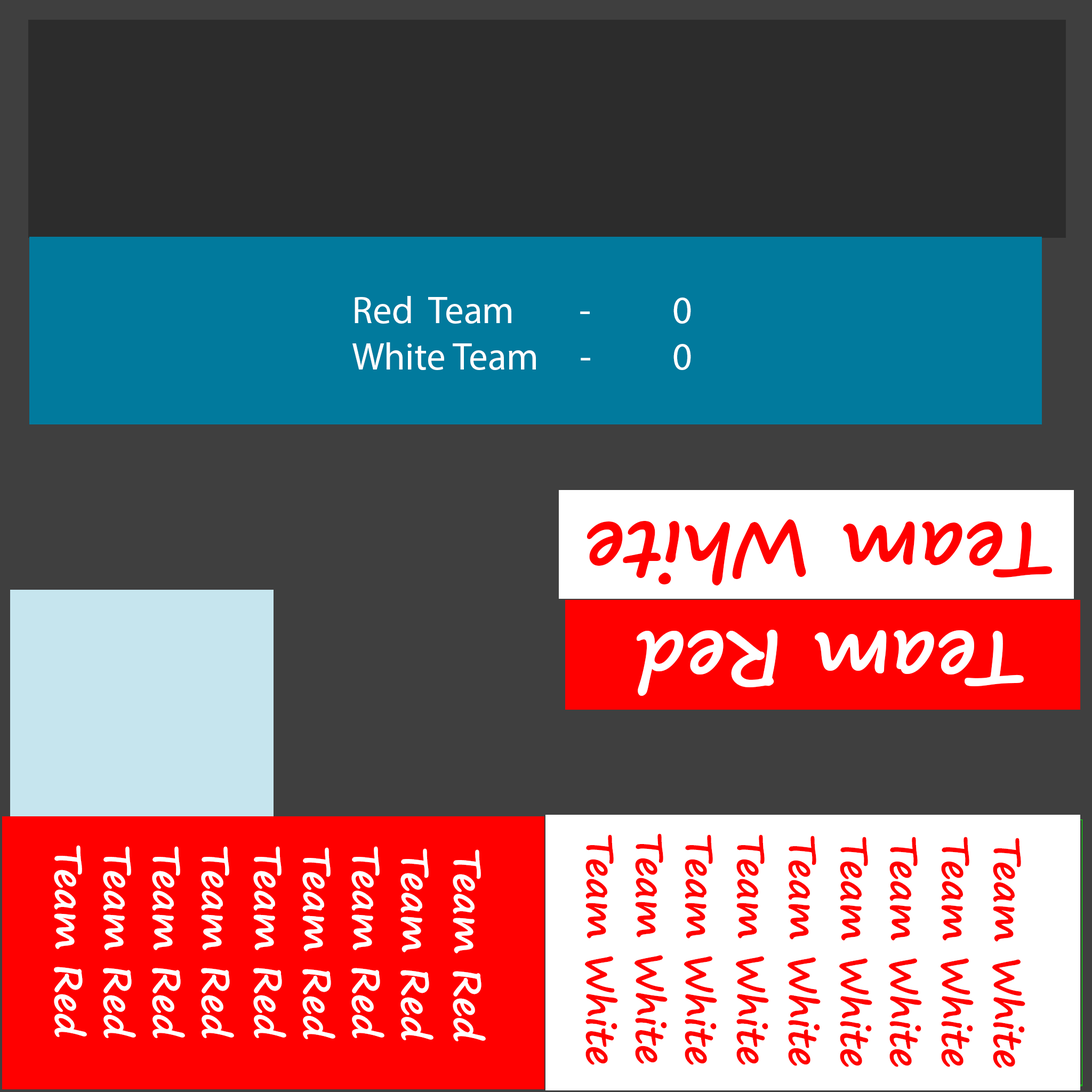
<style>
.page{position:relative;width:1092px;height:1092px;background:#3f3f3f}
.page>*{position:absolute;margin:0}
.t1{font:38.4px "MyriadPro-Regular";color:#ffffff}
.t2{font:77.7px "SegoePrint-Bold";color:#ff0000}
.t3{font:77.7px "SegoePrint-Bold";color:#ffffff}
.t4{font:38.4px "SegoePrint-Bold";color:#ff0000}
.t5{font:38.4px "SegoePrint-Bold";color:#ffffff}
</style>
<div class="page">
<p class="t1" style="left:352px;top:296px;width:339px;height:74px">Red  Team        -          0<br>White Team     -          0</p>
<p class="t2" style="left:587px;top:519px;width:466px;height:66px;rotate:180deg">Team White</p>
<p class="t3" style="left:636px;top:630px;width:388px;height:66px;rotate:180deg">Team Red</p>
<p class="t4" style="left:635px;top:833px;width:33px;height:231px;rotate:90deg">Team White</p>
<p class="t5" style="left:54px;top:845px;width:33px;height:192px;rotate:90deg">Team Red</p>
<p class="t4" style="left:585px;top:834px;width:33px;height:231px;rotate:90deg">Team White</p>
<p class="t4" style="left:684px;top:834px;width:33px;height:231px;rotate:90deg">Team White</p>
<p class="t4" style="left:736px;top:834px;width:33px;height:231px;rotate:90deg">Team White</p>
<p class="t4" style="left:788px;top:836px;width:33px;height:230px;rotate:90deg">Team White</p>
<p class="t4" style="left:839px;top:837px;width:33px;height:230px;rotate:90deg">Team White</p>
<p class="t4" style="left:889px;top:837px;width:33px;height:230px;rotate:90deg">Team White</p>
<p class="t4" style="left:941px;top:837px;width:33px;height:230px;rotate:90deg">Team White</p>
<p class="t4" style="left:992px;top:838px;width:33px;height:230px;rotate:90deg">Team White</p>
<p class="t5" style="left:103px;top:846px;width:33px;height:192px;rotate:90deg">Team Red</p>
<p class="t5" style="left:152px;top:846px;width:33px;height:192px;rotate:90deg">Team Red</p>
<p class="t5" style="left:201px;top:846px;width:33px;height:192px;rotate:90deg">Team Red</p>
<p class="t5" style="left:253px;top:846px;width:33px;height:192px;rotate:90deg">Team Red</p>
<p class="t5" style="left:302px;top:847px;width:33px;height:192px;rotate:90deg">Team Red</p>
<p class="t5" style="left:351px;top:846px;width:33px;height:192px;rotate:90deg">Team Red</p>
<p class="t5" style="left:400px;top:848px;width:33px;height:192px;rotate:90deg">Team Red</p>
<p class="t5" style="left:453px;top:849px;width:33px;height:192px;rotate:90deg">Team Red</p>
</div>
